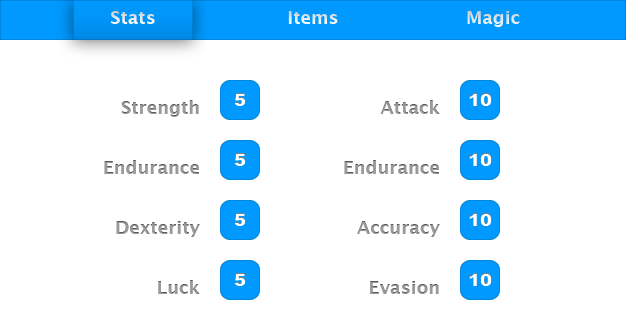
<style>
.page{position:relative;width:626px;height:315px;background:#ffffff}
.page>*{position:absolute;margin:0}
.t1{font:18px "LucidaGrande-Bold";color:#e3edf3}
.t2{font:18px "LucidaGrande-Bold";color:#dce5ec}
.t3{font:18px "LucidaGrande-Bold";color:#999999}
.t4{font:18px "Arial-Black";color:#ffffff}
</style>
<div class="page">
<p class="t1" style="left:111px;top:11px;width:44px;height:13px">Stats</p>
<p class="t1" style="left:288px;top:11px;width:50px;height:13px">Items</p>
<p class="t2" style="left:467px;top:11px;width:53px;height:16px">Magic</p>
<p class="t3" style="left:121px;top:100px;width:78px;height:17px">Strength</p>
<p class="t4" style="left:234px;top:93px;width:12px;height:13px">5</p>
<p class="t3" style="left:380px;top:100px;width:60px;height:14px">Attack</p>
<p class="t4" style="left:469px;top:93px;width:23px;height:13px">10</p>
<p class="t3" style="left:104px;top:160px;width:95px;height:14px">Endurance</p>
<p class="t4" style="left:234px;top:153px;width:12px;height:13px">5</p>
<p class="t3" style="left:344px;top:160px;width:95px;height:14px">Endurance</p>
<p class="t4" style="left:469px;top:153px;width:23px;height:13px">10</p>
<p class="t3" style="left:116px;top:221px;width:84px;height:16px">Dexterity</p>
<p class="t4" style="left:234px;top:213px;width:12px;height:13px">5</p>
<p class="t3" style="left:357px;top:221px;width:83px;height:16px">Accuracy</p>
<p class="t4" style="left:469px;top:213px;width:23px;height:13px">10</p>
<p class="t3" style="left:158px;top:280px;width:42px;height:14px">Luck</p>
<p class="t4" style="left:234px;top:273px;width:12px;height:13px">5</p>
<p class="t3" style="left:370px;top:281px;width:69px;height:13px">Evasion</p>
<p class="t4" style="left:469px;top:273px;width:23px;height:13px">10</p>
</div>
